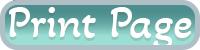
<style>
.page{position:relative;width:200px;height:50px;background:#b0bec5}
.page>*{position:absolute;margin:0}
.t1{font:45.8px "AkayaKanadaka-Regular";color:#ffffff}
</style>
<div class="page">
<p class="t1" style="left:9px;top:7px;width:183px;height:43px">Print Page</p>
</div>
